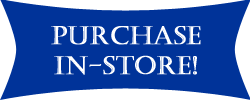
<style>
.page{position:relative;width:250px;height:100px;background:#003399}
.page>*{position:absolute;margin:0}
.t1{font:25px "Castellar";color:#ffffff;font-weight:bold}
</style>
<div class="page">
<p class="t1" style="left:51px;top:26px;width:150px;height:49px;text-align:center">Purchase<br>in-Store!</p>
</div>
